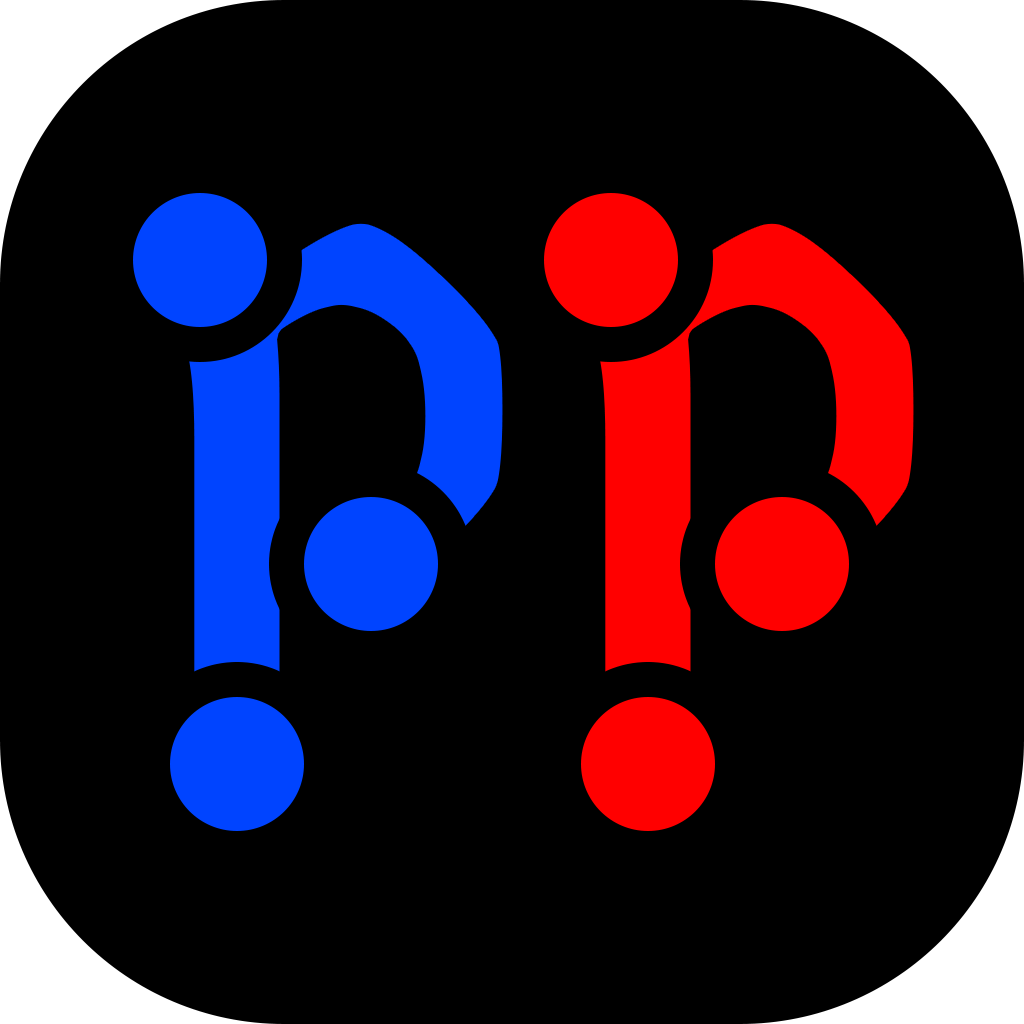
<style>
.page{position:relative;width:1024px;height:1024px;background:#000000}
.page>*{position:absolute;margin:0}
.t1{font:805.1px "GermaniaOne-Regular";color:#0044ff}
.t2{font:805.1px "GermaniaOne-Regular";color:#ff0000}
</style>
<div class="page">
<p class="t1" style="left:133px;top:210px;width:794px;height:574px">P<span class="t2">P</span></p>
</div>
